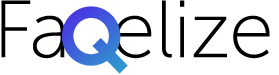
<style>
.page{position:relative;width:279px;height:75px;background:#ffffff}
.page>*{position:absolute;margin:0}
.t1{font:80.6px "MuseoSansCyrl-100";color:#000000}
</style>
<div class="page">
<p class="t1" style="left:1px;top:0px;width:269px;height:59px">Fa  elize</p>
</div>
